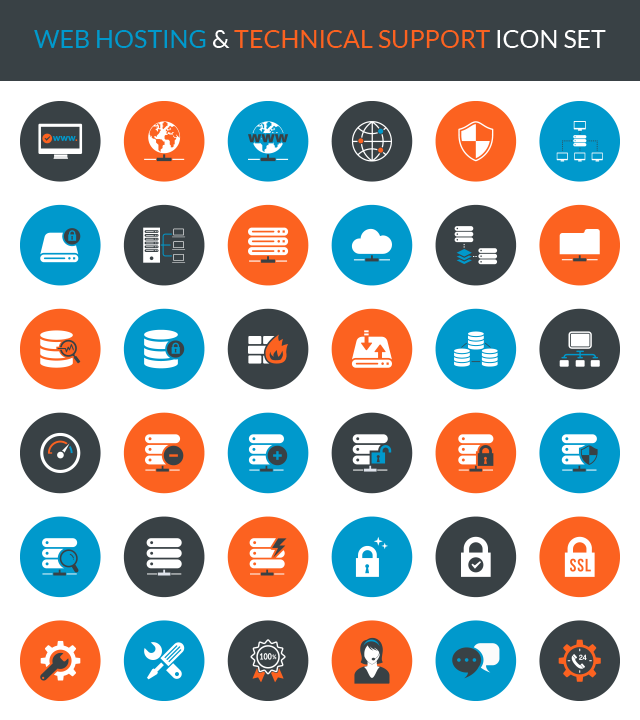
<style>
.page{position:relative;width:640px;height:720px;background:#ffffff}
.page>*{position:absolute;margin:0}
.t1{font:25px "Lato-Regular";color:#fc6220}
.t2{font:25px "Lato-Regular";color:#0099cc}
.t3{font:25px "Lato-Regular";color:#ffffff}
</style>
<div class="page">
<p class="t1" style="left:34px;top:30px;width:572px;height:18px"><span class="t2">WEB HOSTING</span><span class="t3"> &amp; </span>TECHNICAL SUPPORT<span class="t3"> ICON SET</span></p>
</div>
